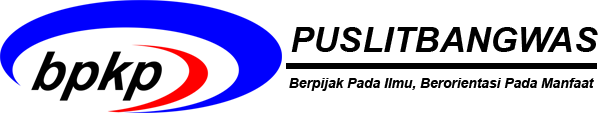
<style>
.page{position:relative;width:598px;height:113px;background:#ffffff}
.page>*{position:absolute;margin:0}
.t1{font:35.1px "Arial-BoldItalicMT";color:#000000}
.t2{font:13.8px "Arial-BoldItalicMT";color:#000000}
</style>
<div class="page">
<p class="t1" style="left:291px;top:27px;width:307px;height:25px">PUSLITBANGWAS</p>
<p class="t2" style="left:289px;top:78px;width:305px;height:13px">Berpijak Pada Ilmu, Berorientasi Pada Manfaat</p>
</div>
